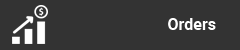
<style>
.page{position:relative;width:240px;height:50px;background:#333333}
.page>*{position:absolute;margin:0}
.t1{font:16px "Roboto-Bold";color:#ffffff}
</style>
<div class="page">
<p class="t1" style="left:168px;top:18px;width:48px;height:12px">Orders</p>
</div>
